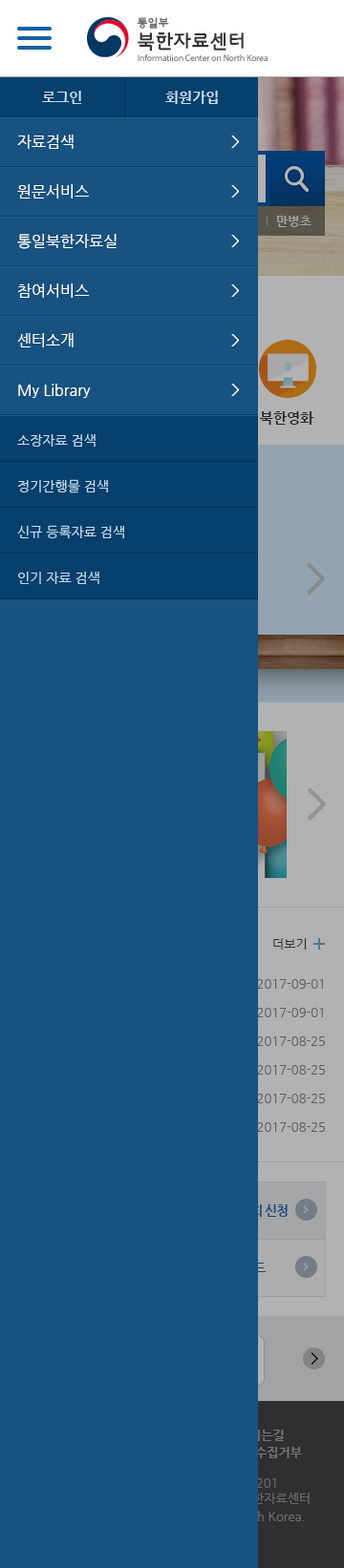
<style>
.page{position:relative;width:344px;height:1568px;background:#175280}
.page>*{position:absolute;margin:0}
.t1{font:11.8px "HYkanB";letter-spacing:-0.1em;color:#666666}
.t2{font:20.3px "HYkanB";letter-spacing:-0.1em;color:#343434}
.t3{font:9.3px "MyriadSemiBold";letter-spacing:-0.03em;color:#7e7e7e}
.t4{font:14.3px "NanumGothicBold";color:#c3ddf2}
.t5{font:15.3px/49.6px "NanumGothic";color:#ffffff}
.t6{font:14.3px "NanumGothicBold";color:#333333}
.t7{font:13.4px/45.8px "NanumGothic";color:#c3ddf2}
.t8{font:12.4px "NanumGothic";color:#464646}
.t9{font:12.4px/28.6px "NanumGothic";color:#5f5f5f}
.t10{font:13.4px "NanumGothicBold";letter-spacing:-0.08em;color:#175280}
.t11{font:12.4px/17.2px "NanumGothicBold"}
</style>
<div class="page">
<p class="t1" style="left:137px;top:17px;width:32px;height:12px">통일부</p>
<p class="t2" style="left:137px;top:32px;width:106px;height:20px">북한자료센터</p>
<p class="t3" style="left:137px;top:54px;width:131px;height:7px">Informatiion Center on North Korea</p>
<p class="t4" style="left:42px;top:91px;width:176px;height:13px">로그인                     회원가입</p>
<p class="t5" style="left:17px;top:135px;width:99px;height:263px">자료검색<br>원문서비스<br>통일북한자료실<br>참여서비스<br>센터소개<br>My Library</p>
<p class="t6" style="left:259px;top:411px;width:55px;height:14px">북한영화</p>
<p class="t7" style="left:17px;top:434px;width:107px;height:150px">소장자료 검색<br>정기간행물 검색<br>신규 등록자료 검색<br>인기 자료 검색</p>
<p class="t8" style="left:273px;top:938px;width:33px;height:12px">더보기</p>
<p class="t9" style="left:257px;top:979px;width:67px;height:153px;text-align:right">2017-09-01<br>2017-09-01<br>2017-08-25<br>2017-08-25<br>2017-08-25<br>2017-08-25</p>
<p class="t10" style="left:181px;top:1204px;width:106px;height:13px">북한실상설명회 신청</p>
<p class="t11" style="left:198px;top:1429px;width:104px;height:29px;text-align:center">찾아오시는길<br>이메일무단수집거부</p>
</div>
